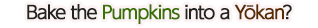
<style>
.page{position:relative;width:318px;height:28px;background:#ffffff}
.page>*{position:absolute;margin:0}
.t1{font:18px "UDShinGoPro-Regular";letter-spacing:-0.08em;color:#232320;font-weight:bold}
.t2{font:18px "UDShinGoPro-Regular";letter-spacing:-0.08em;color:#3a7103;font-weight:bold}
.t3{font:18px "UDShinGoPro-Regular";letter-spacing:-0.08em;color:#592b00;font-weight:bold}
</style>
<div class="page">
<p class="t1" style="left:27px;top:4px;width:265px;height:20px">Bake the <span class="t2">Pumpkins</span> into a <span class="t3">Yōkan</span>?</p>
</div>
